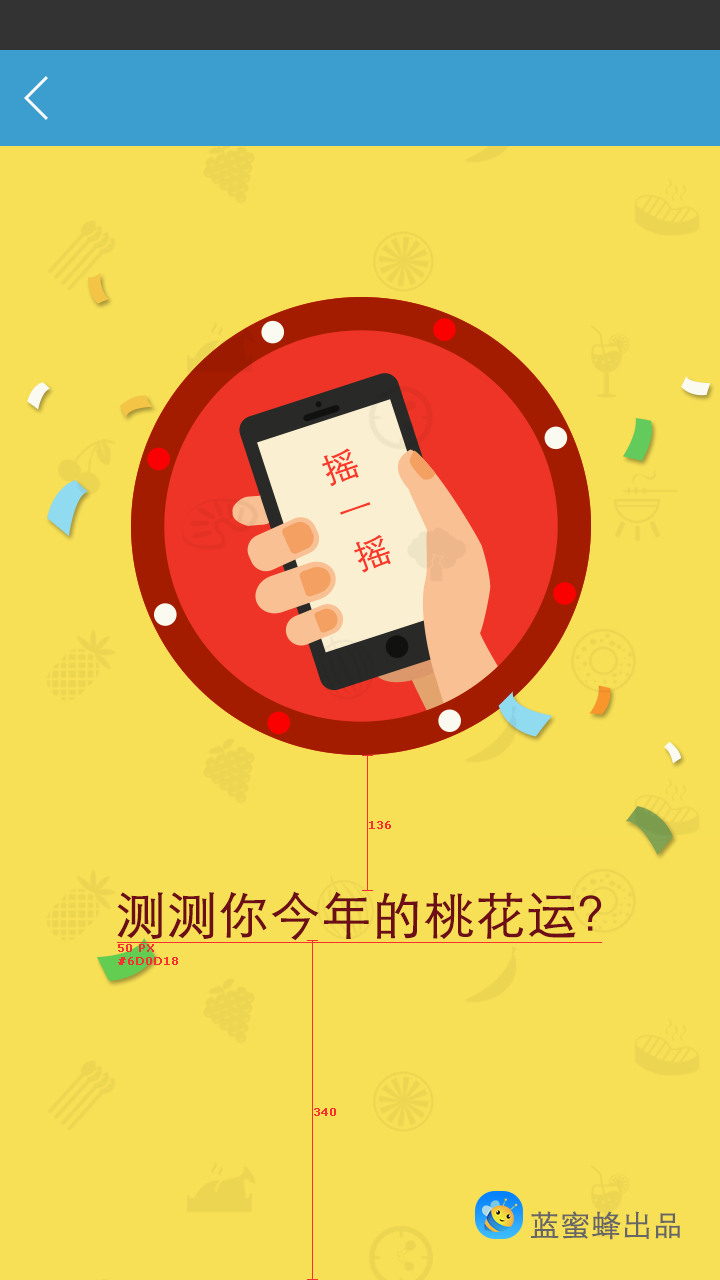
<style>
.page{position:relative;width:720px;height:1280px;background:#f8e056}
.page>*{position:absolute;margin:0}
.t1{font:33.5px "STXihei";color:#ff3a2e;font-weight:bold;scale:1.04 1}
.t2{font:11px "Verdana";color:#f83030;font-weight:bold}
.t3{font:50px "STXihei";color:#6d0d18;font-weight:bold}
.t4{font:30px "STXihei";color:#666666;font-weight:bold}
</style>
<div class="page">
<p class="t1" style="left:322px;top:448px;width:69px;height:125px;rotate:-19deg">摇一摇</p>
<p class="t2" style="left:369px;top:821px;width:22px;height:8px">136</p>
<p class="t3" style="left:117px;top:891px;width:485px;height:50px">测测你今年的桃花运？</p>
<p class="t2" style="left:118px;top:944px;width:60px;height:21px">50 PX<br>#6D0D18</p>
<p class="t2" style="left:314px;top:1108px;width:22px;height:8px">340</p>
<p class="t4" style="left:531px;top:1211px;width:149px;height:29px">蓝蜜蜂出品</p>
</div>
